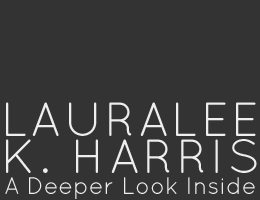
<style>
.page{position:relative;width:260px;height:200px;background:#333333}
.page>*{position:absolute;margin:0}
.t1{font:48px "QuicksandBook-Regular";letter-spacing:0.05em;color:#eeeeee}
.t2{font:48px "QuicksandBook-Regular";letter-spacing:0.073em;color:#eeeeee}
.t3{font:24px "QuicksandBook-Regular";color:#eeeeee}
</style>
<div class="page">
<p class="t1" style="left:6px;top:102px;width:250px;height:34px">LAURALEE</p>
<p class="t2" style="left:6px;top:139px;width:251px;height:34px">K. HARRIS</p>
<p class="t3" style="left:5px;top:177px;width:250px;height:22px">A Deeper Look Inside</p>
</div>
